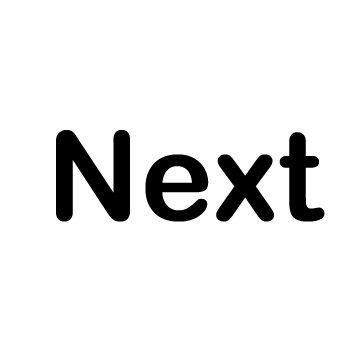
<style>
.page{position:relative;width:360px;height:360px;background:#ffffff}
.page>*{position:absolute;margin:0}
.t1{font:123.6px "ArialRoundedMTBold";color:#000000}
</style>
<div class="page">
<p class="t1" style="left:56px;top:130px;width:269px;height:92px">Next</p>
</div>
